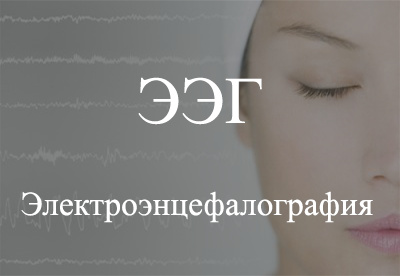
<style>
.page{position:relative;width:400px;height:276px}
.page>*{position:absolute;margin:0}
.t1{font:66.7px "TimesNewRomanPSMT";color:#ffffff}
.t2{font:33.3px "TimesNewRomanPSMT";color:#ffffff}
</style>
<div class="page">
<p class="t1" style="left:138px;top:77px;width:124px;height:48px">ЭЭГ</p>
<p class="t2" style="left:21px;top:191px;width:352px;height:32px">Электроэнцефалография</p>
</div>
